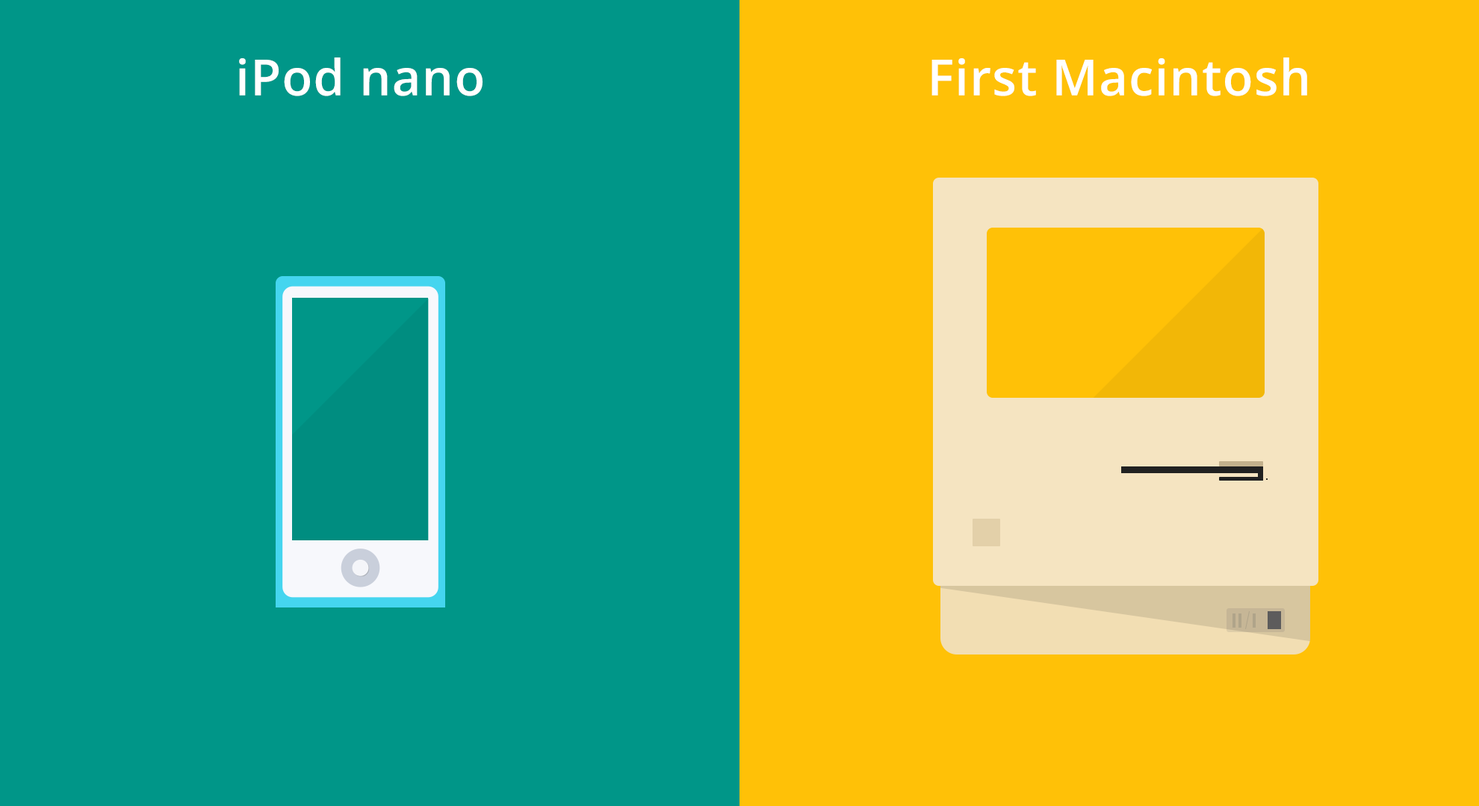
<style>
.page{position:relative;width:1479px;height:806px;background:#009688}
.page>*{position:absolute;margin:0}
.t1{font:49.8px "OpenSans-Semibold";letter-spacing:0.02em;color:#ffffff}
</style>
<div class="page">
<p class="t1" style="left:239px;top:57px;width:243px;height:39px">iPod nano</p>
<p class="t1" style="left:931px;top:57px;width:376px;height:39px">First Macintosh</p>
</div>
